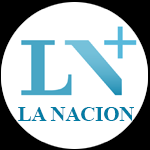
<style>
.page{position:relative;width:150px;height:150px;background:#ffffff}
.page>*{position:absolute;margin:0}
.t1{font:20.8px "TimesNewRomanPS-BoldMT";letter-spacing:-0.005em;color:#047ca4}
</style>
<div class="page">
<p class="t1" style="left:18px;top:107px;width:116px;height:14px">LA NACION</p>
</div>
